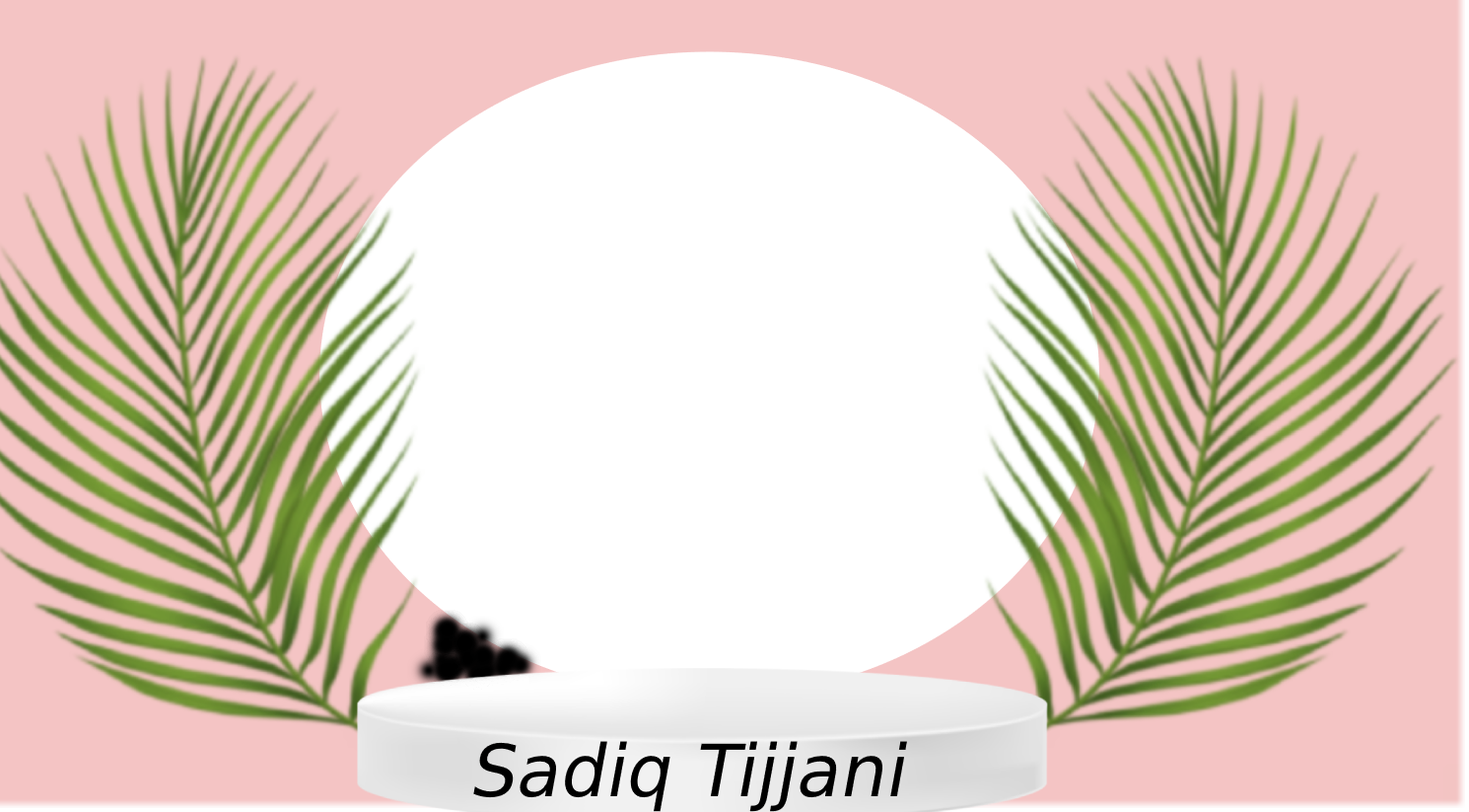
<style>
.page{position:relative;width:1469px;height:812px;background:#ffffff}
.page>*{position:absolute;margin:0}
.t1{font:72px "DejaVuSans";color:#000000;font-style:italic}
</style>
<div class="page">
<p class="t1" style="left:473px;top:741px;width:434px;height:71px">Sadiq Tijjani</p>
</div>
